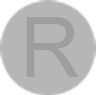
<style>
.page{position:relative;width:96px;height:95px;background:#b6b6b6}
.page>*{position:absolute;margin:0}
.t1{font:83.3px "ArialMT";color:#9e9e9e}
</style>
<div class="page">
<p class="t1" style="left:26px;top:17px;width:53px;height:60px">R</p>
</div>
